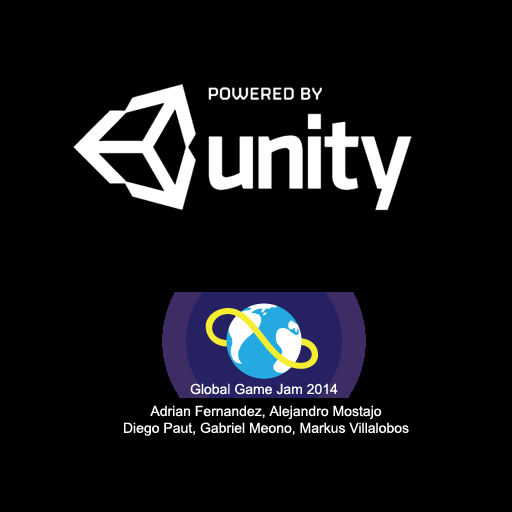
<style>
.page{position:relative;width:512px;height:512px;background:#000000}
.page>*{position:absolute;margin:0}
.t1{font:14px "ArialMT";color:#ffffff}
</style>
<div class="page">
<p class="t1" style="left:124px;top:405px;width:285px;height:31px;text-align:center">Adrian Fernandez, Alejandro Mostajo<br>Diego Paut, Gabriel Meono, Markus Villalobos</p>
</div>
